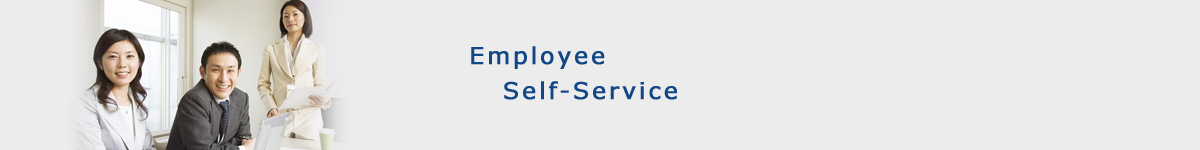
<style>
.page{position:relative;width:1200px;height:150px;background:#ececec}
.page>*{position:absolute;margin:0}
.t1{font:23.5px/35.3px "Verdana";letter-spacing:0.1em;color:#114787;font-weight:bold}
</style>
<div class="page">
<p class="t1" style="left:471px;top:46px;width:206px;height:54px">Employee <br>   Self-Service</p>
</div>
